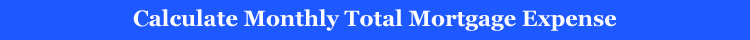
<style>
.page{position:relative;width:750px;height:40px;background:#1e59ff}
.page>*{position:absolute;margin:0}
.t1{font:22px "Georgia-Bold";color:#fbfaff}
</style>
<div class="page">
<p class="t1" style="left:133px;top:9px;width:484px;height:22px">Calculate Monthly Total Mortgage Expense</p>
</div>
